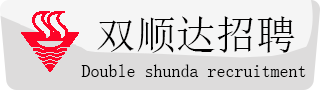
<style>
.page{position:relative;width:320px;height:90px;background:#f5f5f5}
.page>*{position:absolute;margin:0}
.t1{font:40px "SimSun";color:#010000}
.t2{font:18px "SimSun";color:#000000}
</style>
<div class="page">
<p class="t1" style="left:97px;top:16px;width:198px;height:37px">双顺达招聘</p>
<p class="t2" style="left:81px;top:64px;width:225px;height:14px">Double shunda recruitment</p>
</div>
